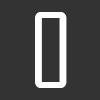
<style>
.page{position:relative;width:100px;height:100px;background:#333333}
.page>*{position:absolute;margin:0}
.t1{font:100px "AgencyFB-Reg";color:#ffffff}
</style>
<div class="page">
<p class="t1" style="left:35px;top:12px;width:32px;height:76px">0</p>
</div>
